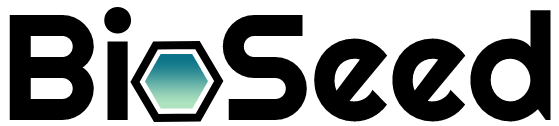
<style>
.page{position:relative;width:559px;height:126px;background:#ffffff}
.page>*{position:absolute;margin:0}
.t1{font:150px "Righteous-Regular";color:#000000}
</style>
<div class="page">
<p class="t1" style="left:9px;top:6px;width:542px;height:116px">Bi  Seed</p>
</div>
